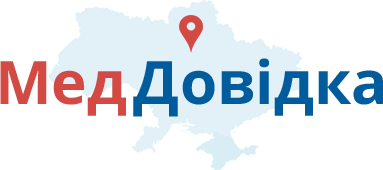
<style>
.page{position:relative;width:383px;height:170px;background:#ffffff}
.page>*{position:absolute;margin:0}
.t1{font:60px "OpenSans-Bold";color:#005c9d}
.t2{font:60px "OpenSans-Bold";color:#d24a43}
</style>
<div class="page">
<p class="t1" style="left:0px;top:58px;width:383px;height:59px"><span class="t2">Мед </span>Довідка</p>
</div>
